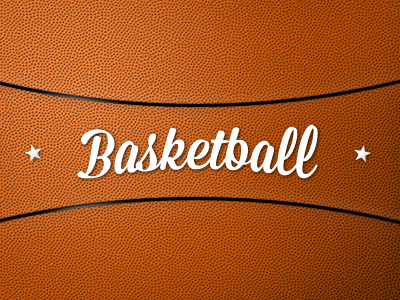
<style>
.page{position:relative;width:400px;height:300px}
.page>*{position:absolute;margin:0}
.t1{font:71px "Mission-Script";color:#ffffff}
</style>
<div class="page">
<p class="t1" style="left:77px;top:124px;width:241px;height:55px">Basketball</p>
</div>
